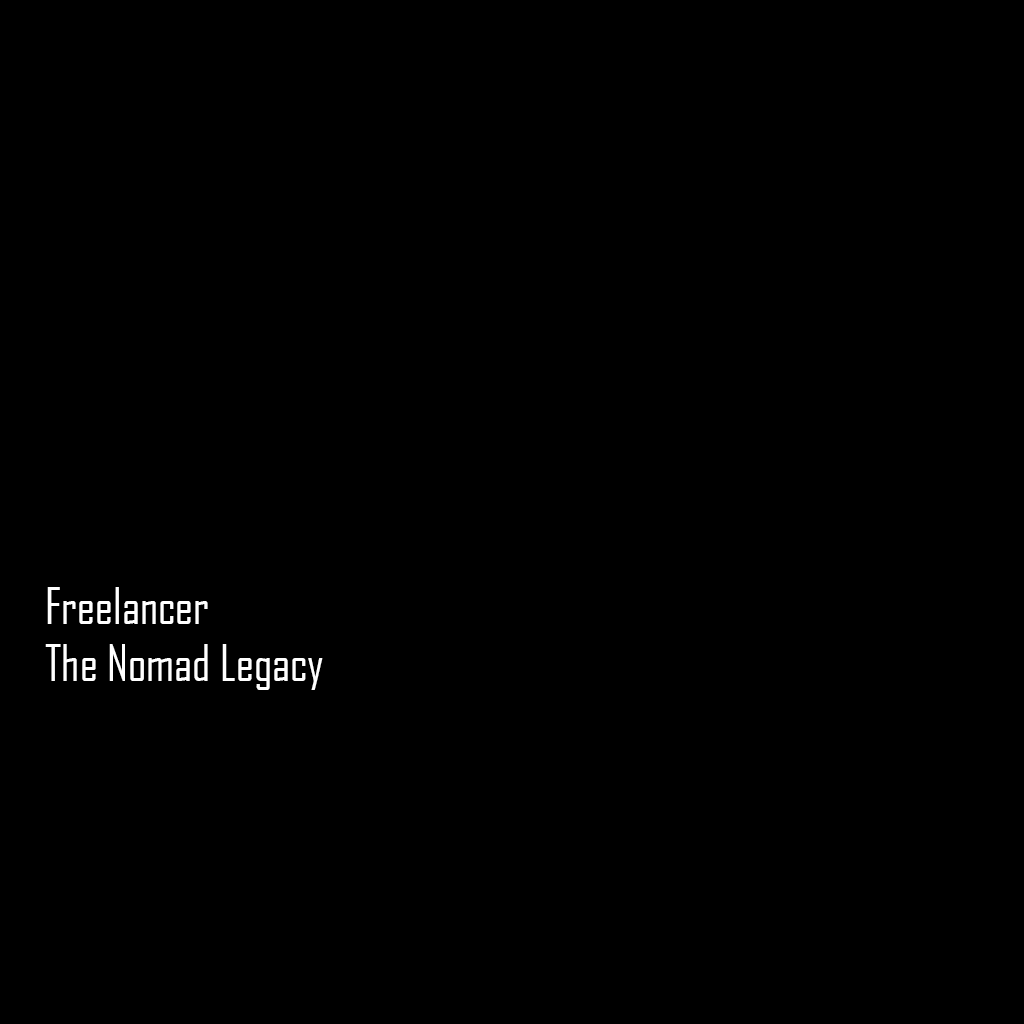
<style>
.page{position:relative;width:1024px;height:1024px;background:#000000}
.page>*{position:absolute;margin:0}
.t1{font:48px "AgencyFBCyrillic";color:#ffffff}
</style>
<div class="page">
<p class="t1" style="left:45px;top:587px;width:278px;height:103px">Freelancer<br>The Nomad Legacy</p>
</div>
